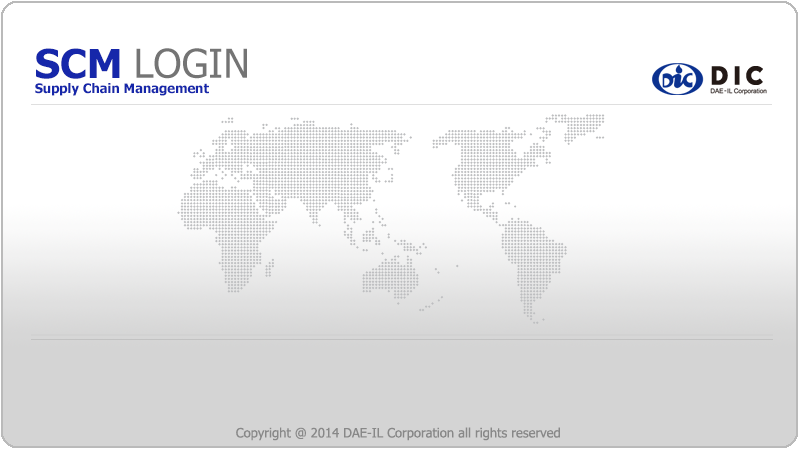
<style>
.page{position:relative;width:800px;height:450px;background:#ffffff}
.page>*{position:absolute;margin:0}
.t1{font:40px "Tahoma-Bold";color:#1627aa}
.t2{font:40px "Tahoma";color:#747474}
.t3{font:13px "Tahoma-Bold";color:#1627aa}
.t4{font:13px "Tahoma";color:#888888}
</style>
<div class="page">
<p class="t1" style="left:36px;top:48px;width:84px;height:31px">SCM</p>
<p class="t2" style="left:136px;top:48px;width:111px;height:31px">LOGIN</p>
<p class="t3" style="left:35px;top:83px;width:174px;height:13px">Supply Chain Management</p>
<p class="t4" style="left:236px;top:427px;width:324px;height:14px">Copyright @ 2014 DAE-IL Corporation all rights reserved</p>
</div>
